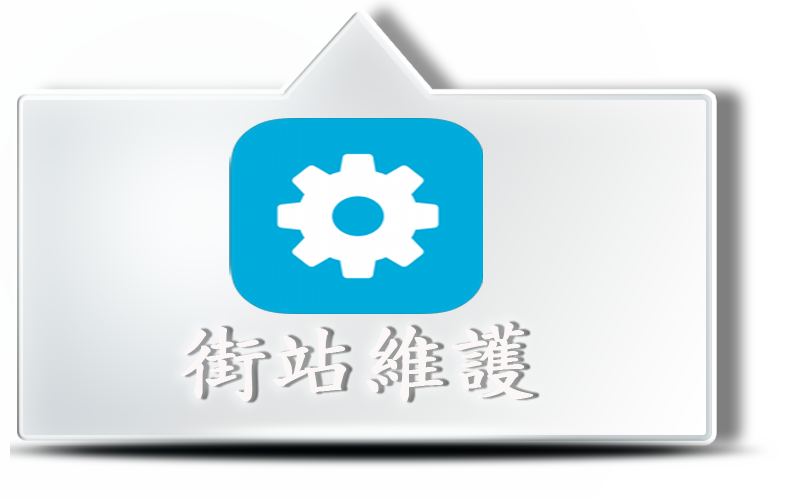
<style>
.page{position:relative;width:800px;height:500px}
.page>*{position:absolute;margin:0}
.t1{font:88px "DFKaiShu-SB-Estd-BF";color:#fcf7f7;font-weight:bold}
</style>
<div class="page">
<p class="t1" style="left:180px;top:322px;width:353px;height:80px">街站維護</p>
</div>
